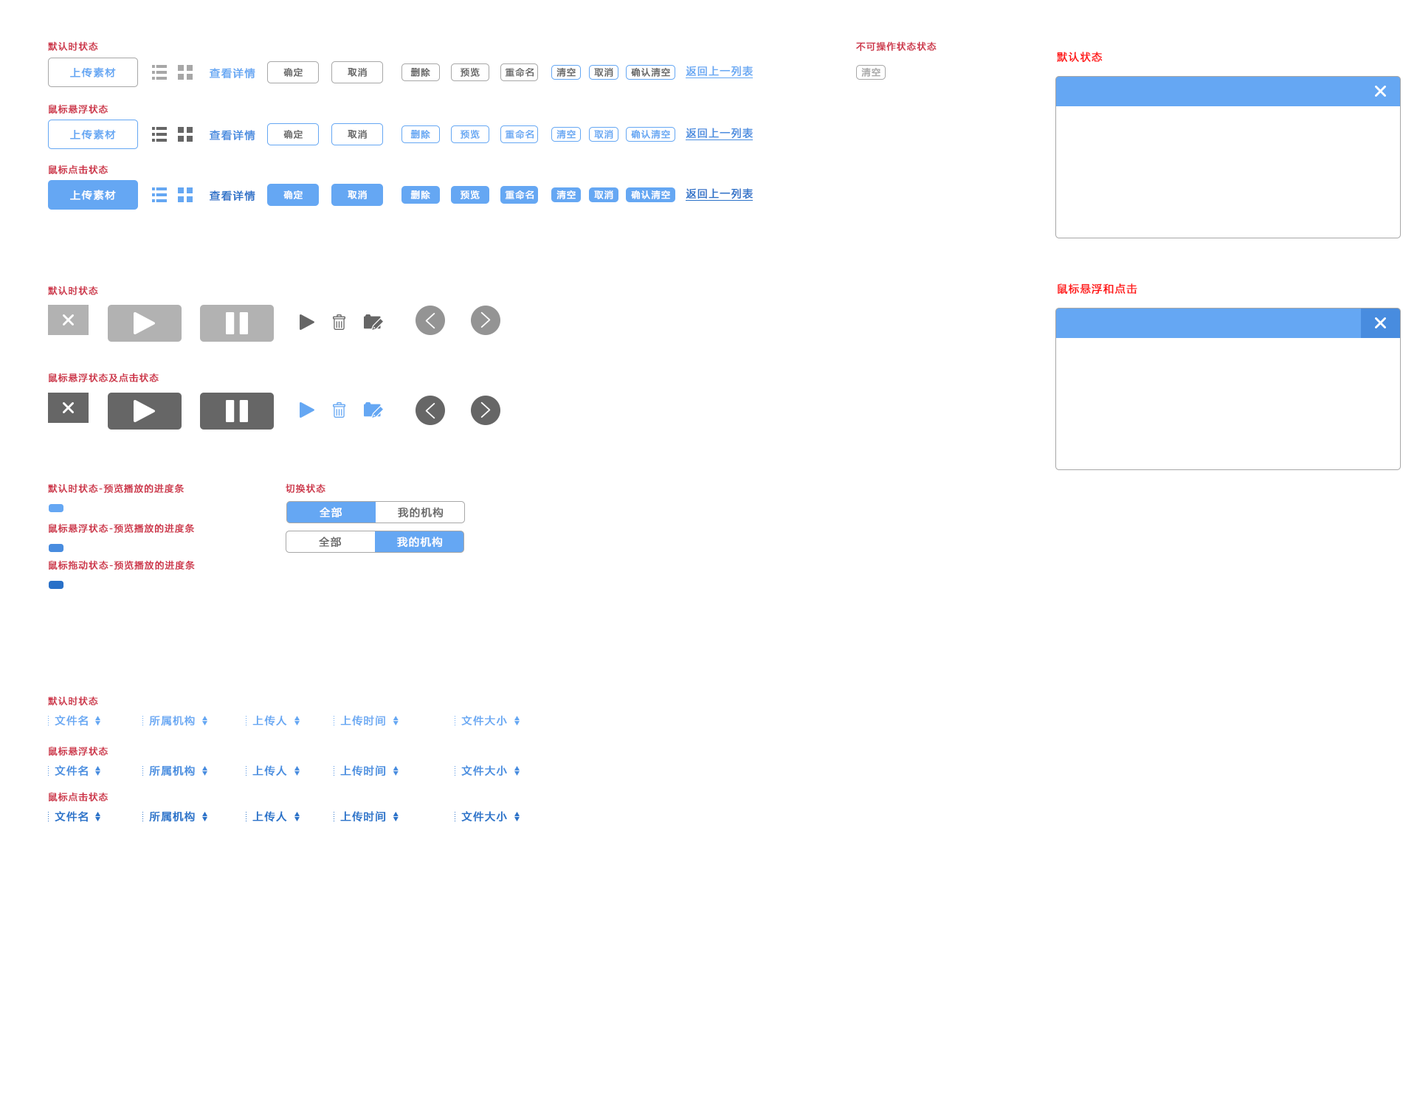
<style>
.page{position:relative;width:1417px;height:1093px;background:#ffffff}
.page>*{position:absolute;margin:0}
.t1{font:9px "MicrosoftYaHei";letter-spacing:0.1em;color:#cd3147;font-weight:bold}
.t2{font:10.3px "MicrosoftYaHei";letter-spacing:0.1em;color:#ff1515;font-weight:bold}
.t3{font:10.3px "MicrosoftYaHei";letter-spacing:0.1em;color:#65a7f3;font-weight:bold}
.t4{font:8.9px "MicrosoftYaHei";letter-spacing:0.1em;color:#666666;font-weight:bold}
.t5{font:8.9px "MicrosoftYaHei";letter-spacing:0.1em;color:#a7a7a7;font-weight:bold}
.t6{font:10.3px "MicrosoftYaHei";letter-spacing:0.1em;color:#488cdf;font-weight:bold}
.t7{font:8.9px "MicrosoftYaHei";letter-spacing:0.1em;color:#65a7f3;font-weight:bold}
.t8{font:10.3px "MicrosoftYaHei";letter-spacing:0.1em;color:#ffffff;font-weight:bold}
.t9{font:10.3px "MicrosoftYaHei";letter-spacing:0.1em;color:#2a71c8;font-weight:bold}
.t10{font:8.9px "MicrosoftYaHei";letter-spacing:0.1em;color:#ffffff;font-weight:bold}
.t11{font:10.3px "MicrosoftYaHei";letter-spacing:0.1em;color:#666666;font-weight:bold}
.t12{font:10.2px "MicrosoftYaHei";letter-spacing:0.1em;color:#65a7f3;font-weight:bold}
.t13{font:9.1px "MicrosoftYaHei";letter-spacing:0.1em;color:#cd3147;font-weight:bold}
.t14{font:10.4px "MicrosoftYaHei";letter-spacing:0.1em;color:#488cdf;font-weight:bold}
.t15{font:10.4px "MicrosoftYaHei";letter-spacing:0.1em;color:#2a71c8;font-weight:bold}
</style>
<div class="page">
<p class="t1" style="left:48px;top:41px;width:50px;height:10px">默认时状态</p>
<p class="t1" style="left:856px;top:41px;width:80px;height:11px">不可操作状态状态</p>
<p class="t2" style="left:1057px;top:52px;width:45px;height:11px">默认状态</p>
<p class="t3" style="left:686px;top:66px;width:67px;height:11px">返回上一列表</p>
<p class="t3" style="left:70px;top:67px;width:46px;height:10px">上传素材</p>
<p class="t3" style="left:210px;top:68px;width:45px;height:11px">查看详情</p>
<p class="t4" style="left:283px;top:68px;width:20px;height:9px">确定</p>
<p class="t4" style="left:348px;top:67px;width:19px;height:10px">取消</p>
<p class="t4" style="left:410px;top:68px;width:20px;height:9px">删除</p>
<p class="t4" style="left:460px;top:67px;width:20px;height:10px">预览</p>
<p class="t4" style="left:505px;top:68px;width:29px;height:9px">重命名</p>
<p class="t4" style="left:556px;top:68px;width:20px;height:9px">清空</p>
<p class="t4" style="left:594px;top:67px;width:19px;height:10px">取消</p>
<p class="t4" style="left:631px;top:67px;width:39px;height:10px">确认清空</p>
<p class="t5" style="left:861px;top:68px;width:19px;height:9px">清空</p>
<p class="t1" style="left:49px;top:104px;width:59px;height:10px">鼠标悬浮状态</p>
<p class="t3" style="left:70px;top:129px;width:46px;height:10px">上传素材</p>
<p class="t6" style="left:210px;top:130px;width:45px;height:11px">查看详情</p>
<p class="t4" style="left:283px;top:130px;width:20px;height:9px">确定</p>
<p class="t4" style="left:348px;top:129px;width:19px;height:10px">取消</p>
<p class="t7" style="left:410px;top:130px;width:20px;height:9px">删除</p>
<p class="t7" style="left:460px;top:129px;width:20px;height:10px">预览</p>
<p class="t7" style="left:505px;top:130px;width:29px;height:9px">重命名</p>
<p class="t7" style="left:556px;top:130px;width:20px;height:9px">清空</p>
<p class="t7" style="left:594px;top:129px;width:19px;height:10px">取消</p>
<p class="t7" style="left:631px;top:129px;width:39px;height:10px">确认清空</p>
<p class="t6" style="left:686px;top:128px;width:67px;height:11px">返回上一列表</p>
<p class="t1" style="left:49px;top:165px;width:59px;height:9px">鼠标点击状态</p>
<p class="t8" style="left:70px;top:190px;width:46px;height:10px">上传素材</p>
<p class="t9" style="left:210px;top:190px;width:45px;height:11px">查看详情</p>
<p class="t10" style="left:283px;top:190px;width:20px;height:9px">确定</p>
<p class="t10" style="left:348px;top:190px;width:19px;height:9px">取消</p>
<p class="t10" style="left:410px;top:190px;width:20px;height:10px">删除</p>
<p class="t10" style="left:460px;top:190px;width:20px;height:9px">预览</p>
<p class="t10" style="left:505px;top:190px;width:29px;height:10px">重命名</p>
<p class="t10" style="left:556px;top:190px;width:20px;height:9px">清空</p>
<p class="t10" style="left:594px;top:190px;width:19px;height:9px">取消</p>
<p class="t10" style="left:631px;top:190px;width:39px;height:9px">确认清空</p>
<p class="t9" style="left:686px;top:188px;width:67px;height:11px">返回上一列表</p>
<p class="t1" style="left:48px;top:286px;width:50px;height:9px">默认时状态</p>
<p class="t2" style="left:1057px;top:283px;width:80px;height:11px">鼠标悬浮和点击</p>
<p class="t1" style="left:49px;top:373px;width:110px;height:9px">鼠标悬浮状态及点击状态</p>
<p class="t1" style="left:48px;top:483px;width:136px;height:10px">默认时状态-预览播放的进度条</p>
<p class="t1" style="left:286px;top:483px;width:39px;height:10px">切换状态</p>
<p class="t8" style="left:320px;top:507px;width:22px;height:11px">全部</p>
<p class="t11" style="left:398px;top:507px;width:45px;height:11px">我的机构</p>
<p class="t1" style="left:49px;top:523px;width:145px;height:10px">鼠标悬浮状态-预览播放的进度条</p>
<p class="t11" style="left:319px;top:536px;width:23px;height:12px">全部</p>
<p class="t8" style="left:397px;top:536px;width:46px;height:12px">我的机构</p>
<p class="t1" style="left:49px;top:560px;width:146px;height:10px">鼠标拖动状态-预览播放的进度条</p>
<p class="t1" style="left:48px;top:696px;width:50px;height:9px">默认时状态</p>
<p class="t3" style="left:55px;top:715px;width:33px;height:11px">文件名</p>
<p class="t12" style="left:149px;top:715px;width:46px;height:11px">所属机构</p>
<p class="t12" style="left:252px;top:715px;width:35px;height:11px">上传人</p>
<p class="t12" style="left:340px;top:715px;width:45px;height:11px">上传时间</p>
<p class="t12" style="left:461px;top:715px;width:46px;height:11px">文件大小</p>
<p class="t13" style="left:49px;top:746px;width:59px;height:10px">鼠标悬浮状态</p>
<p class="t14" style="left:55px;top:765px;width:33px;height:11px">文件名</p>
<p class="t6" style="left:149px;top:765px;width:46px;height:11px">所属机构</p>
<p class="t6" style="left:252px;top:765px;width:35px;height:11px">上传人</p>
<p class="t6" style="left:340px;top:765px;width:46px;height:11px">上传时间</p>
<p class="t6" style="left:461px;top:765px;width:46px;height:11px">文件大小</p>
<p class="t13" style="left:49px;top:792px;width:59px;height:9px">鼠标点击状态</p>
<p class="t15" style="left:55px;top:811px;width:33px;height:11px">文件名</p>
<p class="t9" style="left:149px;top:811px;width:46px;height:11px">所属机构</p>
<p class="t9" style="left:252px;top:811px;width:35px;height:11px">上传人</p>
<p class="t9" style="left:340px;top:811px;width:46px;height:11px">上传时间</p>
<p class="t9" style="left:461px;top:811px;width:46px;height:11px">文件大小</p>
</div>
